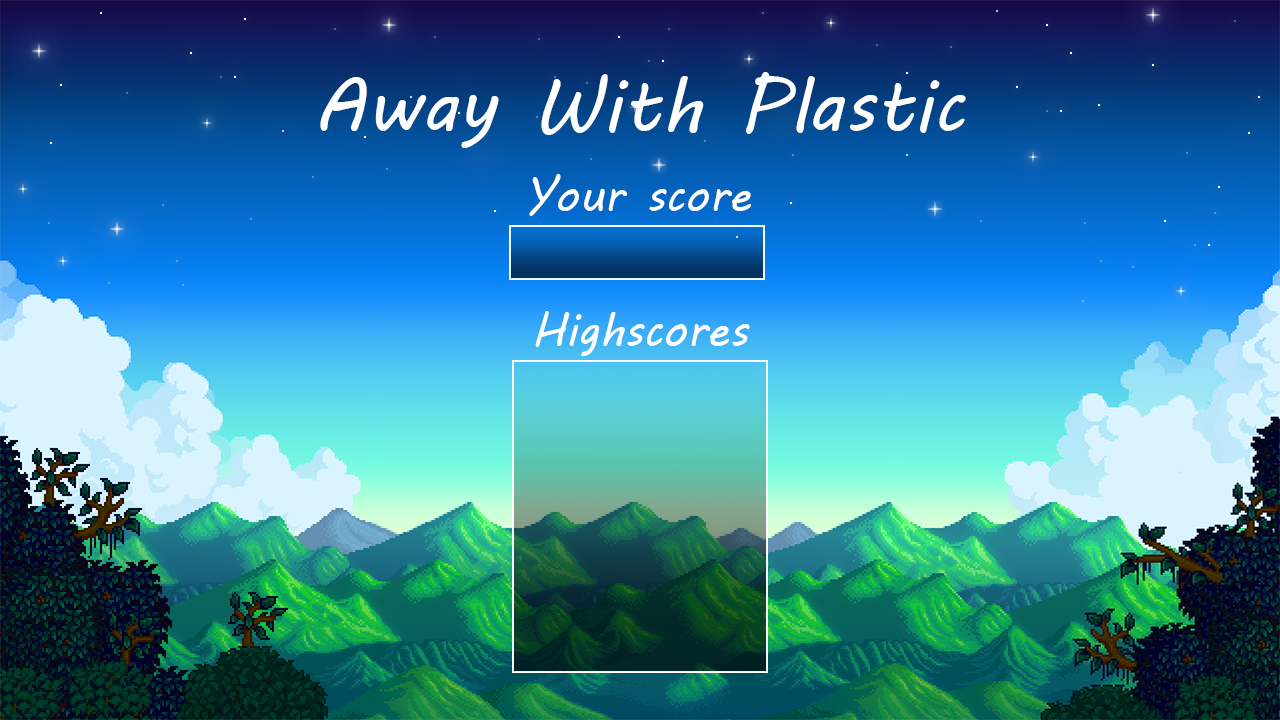
<style>
.page{position:relative;width:1280px;height:720px}
.page>*{position:absolute;margin:0}
.t1{font:75px "MVBoli";color:#ffffff}
.t2{font:45.8px "MVBoli";color:#ffffff}
</style>
<div class="page">
<p class="t1" style="left:320px;top:72px;width:646px;height:76px">Away With Plastic</p>
<p class="t2" style="left:529px;top:174px;width:222px;height:42px">Your score</p>
<p class="t2" style="left:535px;top:311px;width:215px;height:45px">Highscores</p>
</div>
